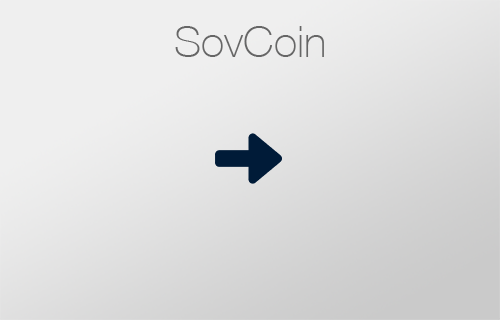
<style>
.page{position:relative;width:500px;height:320px}
.page>*{position:absolute;margin:0}
.t1{font:42.9px "HelveticaNeue-Thin";color:#666666}
</style>
<div class="page">
<p class="t1" style="left:175px;top:26px;width:149px;height:31px">SovCoin</p>
</div>
